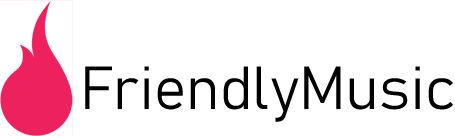
<style>
.page{position:relative;width:455px;height:136px;background:#ffffff}
.page>*{position:absolute;margin:0}
.t1{font:60px "Bahnschrift-Light";color:#000000}
</style>
<div class="page">
<p class="t1" style="left:85px;top:66px;width:368px;height:56px">FriendlyMusic</p>
</div>
